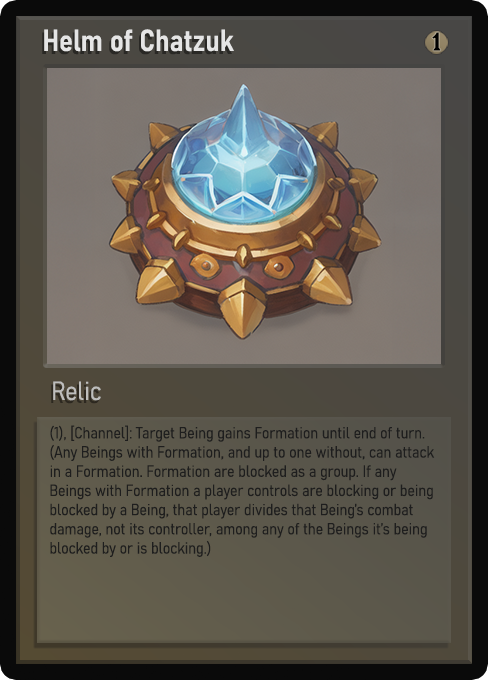
<style>
.page{position:relative;width:488px;height:680px}
.page>*{position:absolute;margin:0}
.t1{font:30px "Bahnschrift-SemiBoldSemiCondensed";color:#f2f2f2;font-weight:bold}
.t2{font:25px "WTRRoycroft";color:#000000;font-weight:bold;scale:1.09 1}
.t3{font:26px "Bahnschrift-LightSemiCondensed";color:#c8c8c8;font-weight:bold}
.t4{font:16px "Bahnschrift-LightSemiCondensed";color:#1e1e1e;font-weight:bold}
</style>
<div class="page">
<p class="t1" style="left:44px;top:29px;width:190px;height:23px;opacity:0.9">Helm of Chatzuk</p>
<p class="t2" style="left:432px;top:32px;width:9px;height:19px">1</p>
<p class="t3" style="left:53px;top:381px;width:48px;height:20px;opacity:0.9">Relic</p>
<p class="t4" style="left:50px;top:425px;width:385px;height:132px">(1), [Channel]: Target Being gains Formation until end of turn. (Any Beings with Formation, and up to one without, can attack in a Formation. Formation are blocked as a group. If any Beings with Formation a player controls are blocking or being blocked by a Being, that player divides that Being’s combat damage, not its controller, among any of the Beings it’s being blocked by or is blocking.)</p>
</div>
